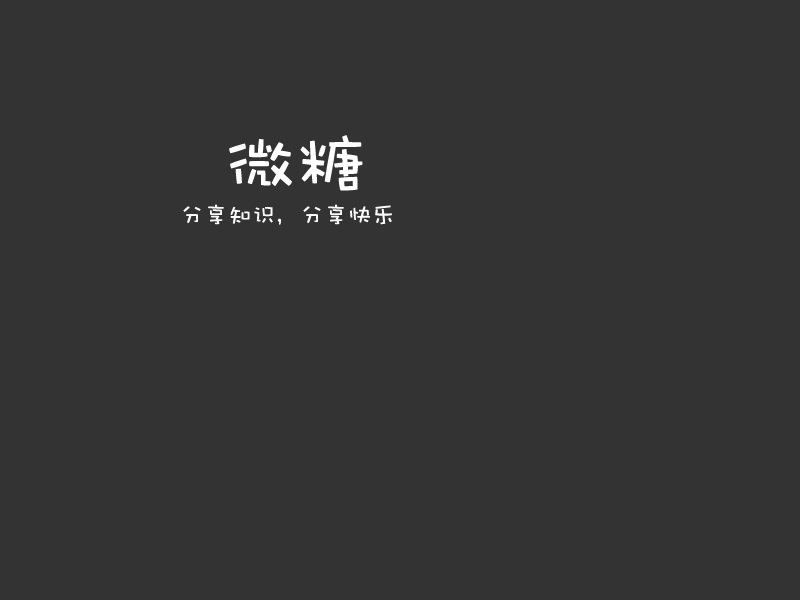
<style>
.page{position:relative;width:800px;height:600px;background:#333333}
.page>*{position:absolute;margin:0}
.t1{font:72px "DFWaWaSC-W5";color:#fffefe}
.t2{font:24px "DFWaWaSC-W5";color:#fcfbfb}
</style>
<div class="page">
<p class="t1" style="left:229px;top:135px;width:134px;height:56px">微糖</p>
<p class="t2" style="left:183px;top:204px;width:209px;height:21px">分享知识，分享快乐</p>
</div>
